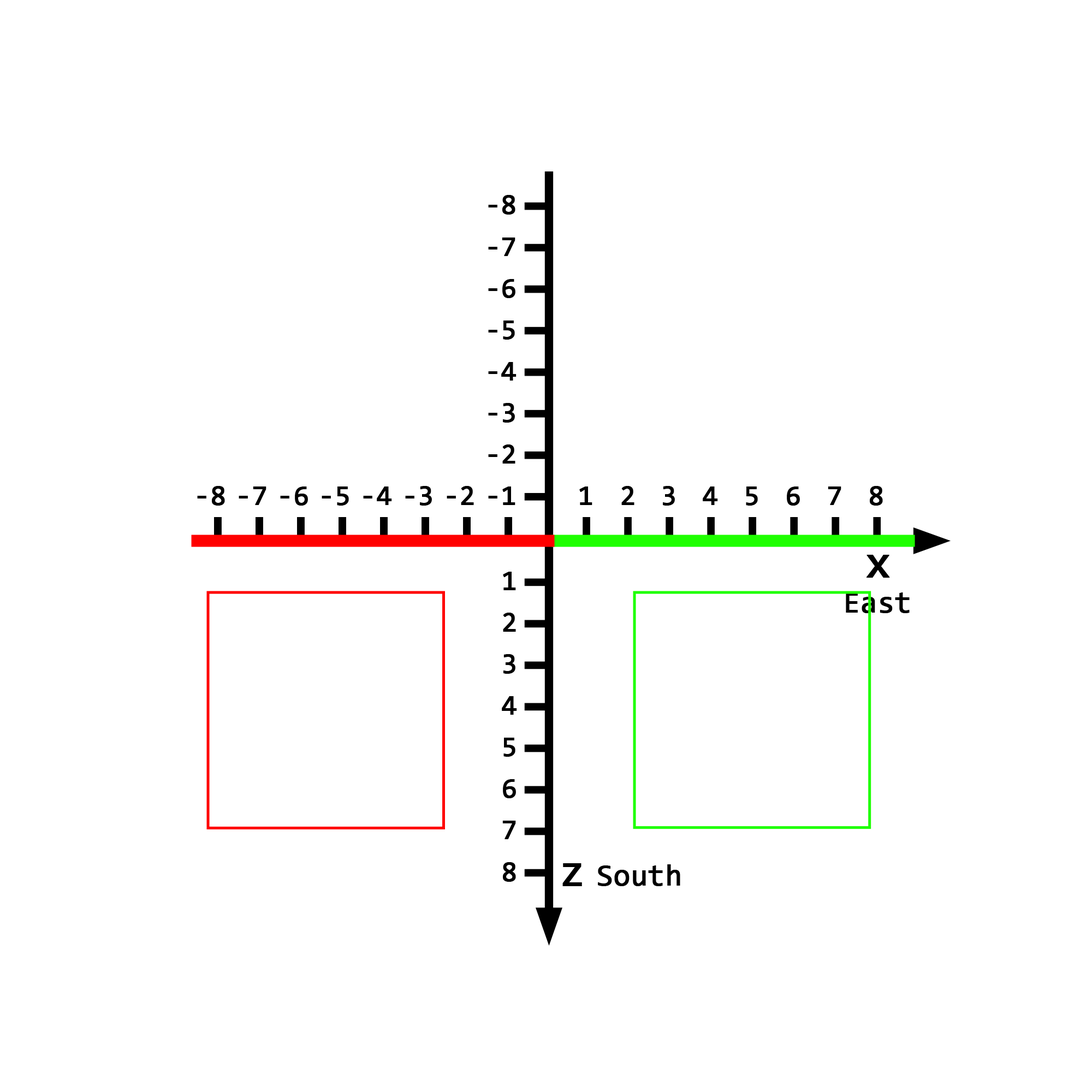
<style>
.page{position:relative;width:1092px;height:1092px;background:#ffffff}
.page>*{position:absolute;margin:0}
.t1{font:27.7px "Consolas";color:#000000;font-weight:bold}
.t2{font:45.5px "Consolas";color:#000000;font-weight:bold}
.t3{font:29.9px "Consolas";color:#000000;font-weight:bold}
</style>
<div class="page">
<p class="t1" style="left:488px;top:195px;width:27px;height:20px">-8</p>
<p class="t1" style="left:488px;top:238px;width:27px;height:18px">-7</p>
<p class="t1" style="left:488px;top:279px;width:27px;height:19px">-6</p>
<p class="t1" style="left:488px;top:320px;width:27px;height:20px">-5</p>
<p class="t1" style="left:488px;top:362px;width:29px;height:19px">-4</p>
<p class="t1" style="left:488px;top:403px;width:27px;height:20px">-3</p>
<p class="t1" style="left:488px;top:444px;width:27px;height:20px">-2</p>
<p class="t1" style="left:197px;top:486px;width:28px;height:20px">-8</p>
<p class="t1" style="left:405px;top:486px;width:27px;height:20px">-3</p>
<p class="t1" style="left:447px;top:486px;width:27px;height:19px">-2</p>
<p class="t1" style="left:621px;top:486px;width:13px;height:19px">2</p>
<p class="t1" style="left:663px;top:486px;width:12px;height:20px">3</p>
<p class="t1" style="left:870px;top:486px;width:13px;height:20px">8</p>
<p class="t1" style="left:239px;top:486px;width:27px;height:19px">-7</p>
<p class="t1" style="left:280px;top:486px;width:28px;height:20px">-6</p>
<p class="t1" style="left:322px;top:486px;width:27px;height:20px">-5</p>
<p class="t1" style="left:363px;top:486px;width:29px;height:19px">-4</p>
<p class="t1" style="left:488px;top:486px;width:27px;height:19px">-1</p>
<p class="t1" style="left:579px;top:486px;width:13px;height:19px">1</p>
<p class="t1" style="left:703px;top:486px;width:15px;height:19px">4</p>
<p class="t1" style="left:746px;top:486px;width:12px;height:20px">5</p>
<p class="t1" style="left:787px;top:486px;width:13px;height:20px">6</p>
<p class="t1" style="left:828px;top:486px;width:13px;height:19px">7</p>
<p class="t2" style="left:866px;top:555px;width:24px;height:23px">x</p>
<p class="t1" style="left:503px;top:572px;width:13px;height:18px">1</p>
<p class="t3" style="left:846px;top:592px;width:64px;height:21px">East</p>
<p class="t1" style="left:503px;top:613px;width:13px;height:19px">2</p>
<p class="t1" style="left:503px;top:654px;width:12px;height:20px">3</p>
<p class="t1" style="left:502px;top:696px;width:15px;height:19px">4</p>
<p class="t1" style="left:503px;top:738px;width:12px;height:19px">5</p>
<p class="t1" style="left:503px;top:779px;width:13px;height:19px">6</p>
<p class="t1" style="left:502px;top:821px;width:14px;height:18px">7</p>
<p class="t1" style="left:503px;top:862px;width:13px;height:20px">8</p>
<p class="t2" style="left:562px;top:863px;width:20px;height:23px">z</p>
<p class="t3" style="left:598px;top:864px;width:82px;height:22px">South</p>
</div>
